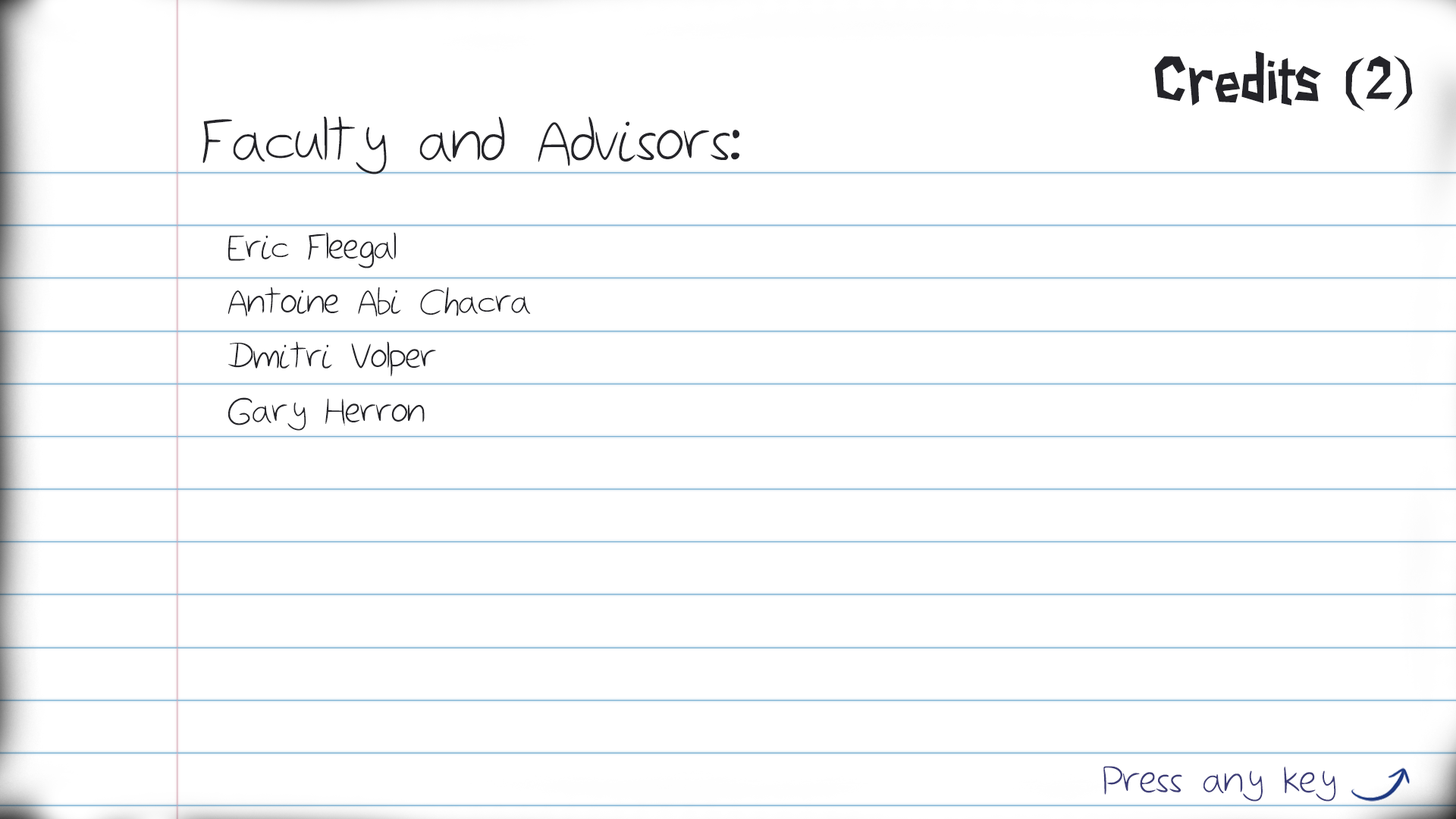
<style>
.page{position:relative;width:1456px;height:819px;background:#ffffff}
.page>*{position:absolute;margin:0}
.t1{font:59.4px "PaperCuts2";color:#242429}
.t2{font:77px "Sketchbook";color:#242429}
.t3{font:45.5px "Sketchbook";color:#242429}
.t4{font:49.5px "Sketchbook";color:#3d3d78}
</style>
<div class="page">
<p class="t1" style="left:1154px;top:51px;width:259px;height:60px">Credits (2)</p>
<p class="t2" style="left:202px;top:116px;width:537px;height:58px">Faculty and Advisors:</p>
<p class="t3" style="left:228px;top:232px;width:303px;height:199px">Eric Fleegal<br>Antoine Abi Chacra<br>Dmitri Volper<br>Gary Herron</p>
<p class="t4" style="left:1103px;top:766px;width:233px;height:36px">Press any key</p>
</div>
